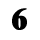
<style>
.page{position:relative;width:40px;height:40px;background:#ffffff}
.page>*{position:absolute;margin:0}
.t1{font:30px "TimesNewRomanMT-ExtraBold";letter-spacing:0.1em;color:#000000;font-weight:bold}
</style>
<div class="page">
<p class="t1" style="left:12px;top:8px;width:15px;height:22px">6</p>
</div>
